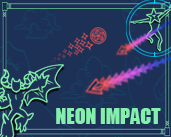
<style>
.page{position:relative;width:171px;height:137px;background:#1d3156}
.page>*{position:absolute;margin:0}
.t1{font:20px "Impact";color:#86f1ad}
</style>
<div class="page">
<p class="t1" style="left:56px;top:108px;width:105px;height:16px">NEON IMPACT</p>
</div>
